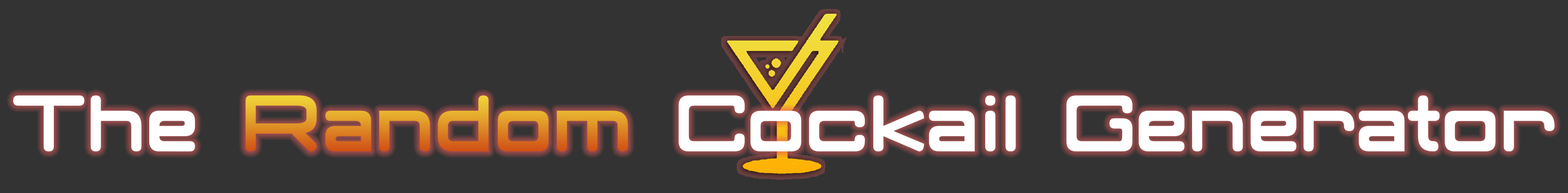
<style>
.page{position:relative;width:1568px;height:193px;background:#333333}
.page>*{position:absolute;margin:0}
.t1{font:103.9px "ClassicRobot";color:#ffffff}
</style>
<div class="page">
<p class="t1" style="left:13px;top:95px;width:1542px;height:57px">The Random Cockail Generator</p>
</div>
